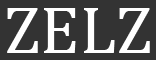
<style>
.page{position:relative;width:156px;height:60px;background:#333333}
.page>*{position:absolute;margin:0}
.t1{font:67.9px "CambriaMath";color:#ffffff}
</style>
<div class="page">
<p class="t1" style="left:7px;top:8px;width:143px;height:45px">ZELZ</p>
</div>
